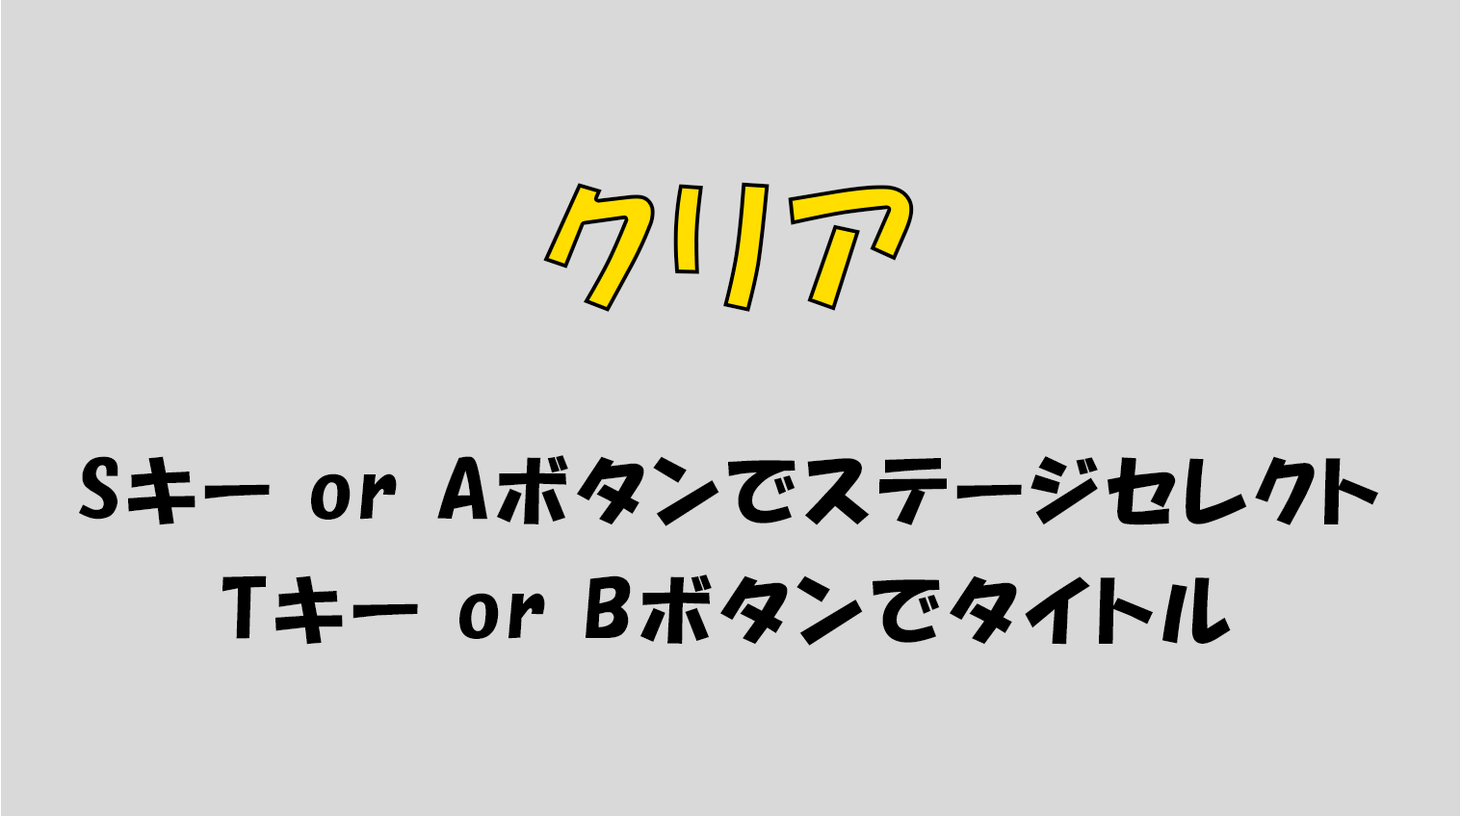
<style>
.page{position:relative;width:1461px;height:816px;background:#d9d9d9}
.page>*{position:absolute;margin:0}
.t1{font:144.4px "HGPSoeiKakupoptai";letter-spacing:0.08em;color:#ffde00}
.t2{font:77px "HGPSoeiKakupoptai";letter-spacing:0.08em;color:#000000}
</style>
<div class="page">
<p class="t1" style="left:543px;top:182px;width:371px;height:130px">クリア</p>
<p class="t2" style="left:79px;top:455px;width:1300px;height:72px">Sキー or Aボタンでステージセレクト</p>
<p class="t2" style="left:222px;top:575px;width:1008px;height:71px">Tキー or Bボタンでタイトル</p>
</div>
